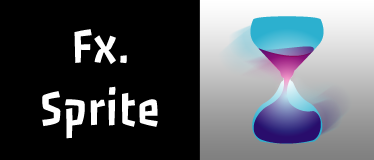
<style>
.page{position:relative;width:374px;height:160px;background:#000000}
.page>*{position:absolute;margin:0}
.t1{font:52px "PasseroOne-Regular";color:#ffffff}
</style>
<div class="page">
<p class="t1" style="left:42px;top:29px;width:116px;height:110px;text-align:center">Fx.<br>Sprite</p>
</div>
